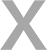
<style>
.page{position:relative;width:47px;height:50px;background:#ffffff}
.page>*{position:absolute;margin:0}
.t1{font:75.1px "Gautami-Bold";color:#a7a7a7}
</style>
<div class="page">
<p class="t1" style="left:0px;top:0px;width:47px;height:50px">X</p>
</div>
